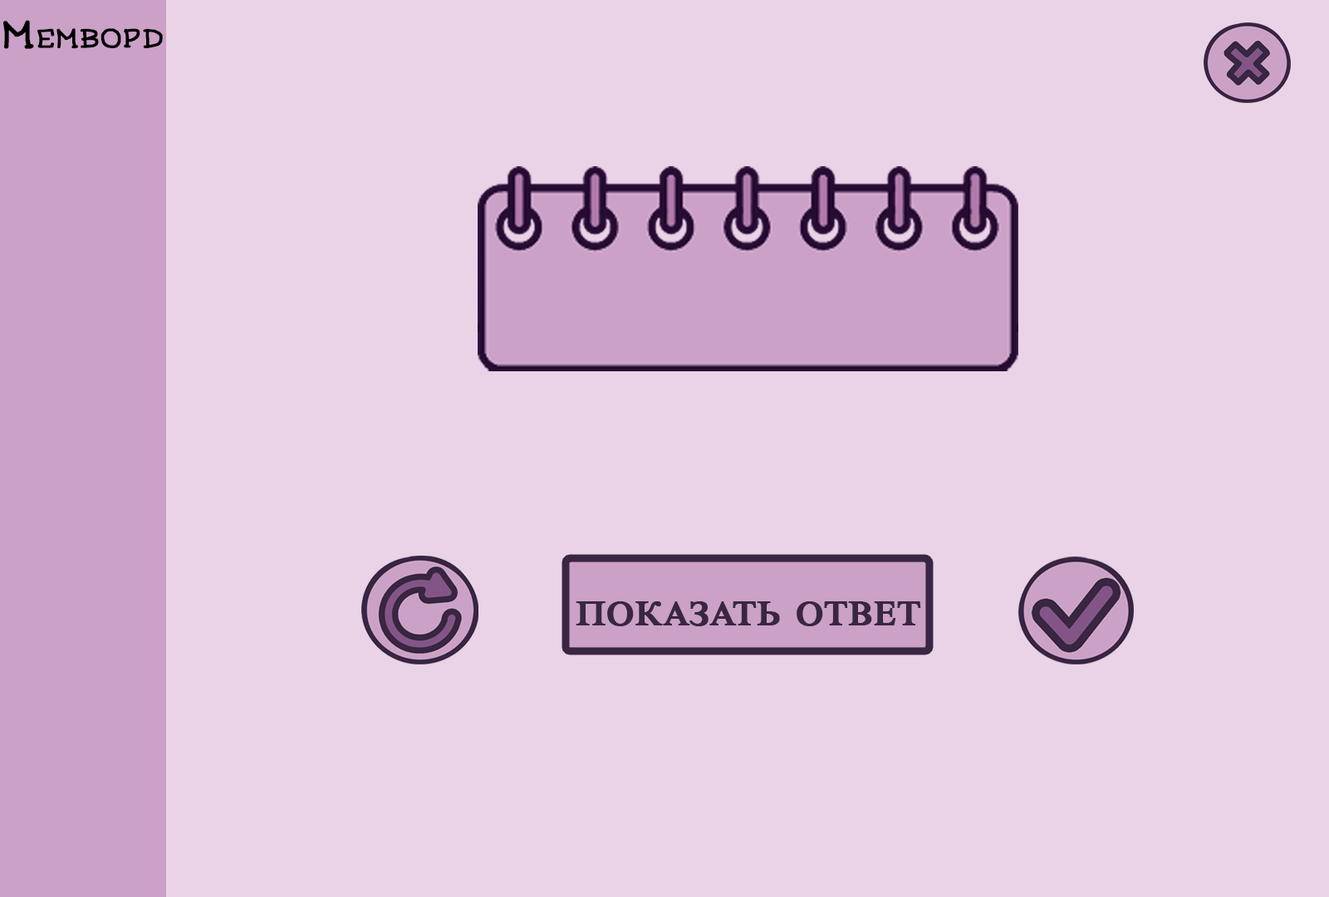
<style>
.page{position:relative;width:1329px;height:897px;background:#ead3e7}
.page>*{position:absolute;margin:0}
.t1{font:38.1px "Mandy'sSketch";color:#000000;font-variant:small-caps;font-weight:bold}
.t2{font:49.4px "TimesNewRomanPSMT";color:#392642;font-variant:small-caps;font-weight:bold}
</style>
<div class="page">
<p class="t1" style="left:3px;top:20px;width:160px;height:29px">Мемворд</p>
<p class="t2" style="left:576px;top:601px;width:345px;height:25px">показать ответ</p>
</div>
